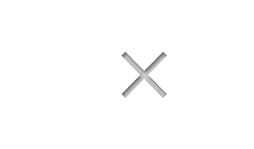
<style>
.page{position:relative;width:254px;height:149px;background:#ffffff}
.page>*{position:absolute;margin:0}
.t1{font:88px "MyriadPro-Regular"}
</style>
<div class="page">
<p class="t1" style="left:121px;top:51px;width:46px;height:47px">×</p>
</div>
